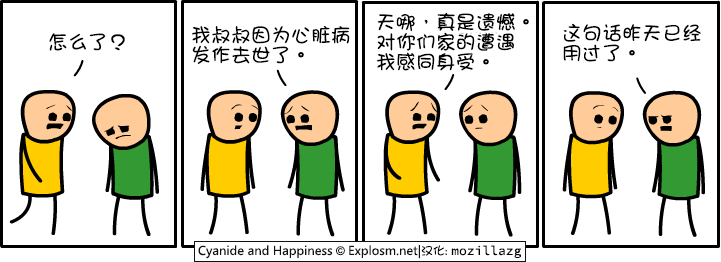
<style>
.page{position:relative;width:721px;height:262px;background:#ffffff}
.page>*{position:absolute;margin:0}
.t1{font:20px/20px "DFGirl";color:#000000}
.t2{font:20px "DFGirl";color:#000000}
</style>
<div class="page">
<p class="t1" style="left:376px;top:12px;width:153px;height:59px">天哪，真是遗憾。<br>对你们家的遭遇<br>我感同身受。</p>
<p class="t1" style="left:191px;top:25px;width:159px;height:39px">我叔叔因为心脏病<br>发作去世了。</p>
<p class="t1" style="left:563px;top:23px;width:138px;height:39px">这句话昨天已经<br>用过了。</p>
<p class="t2" style="left:49px;top:33px;width:76px;height:18px">怎么了？</p>
</div>
